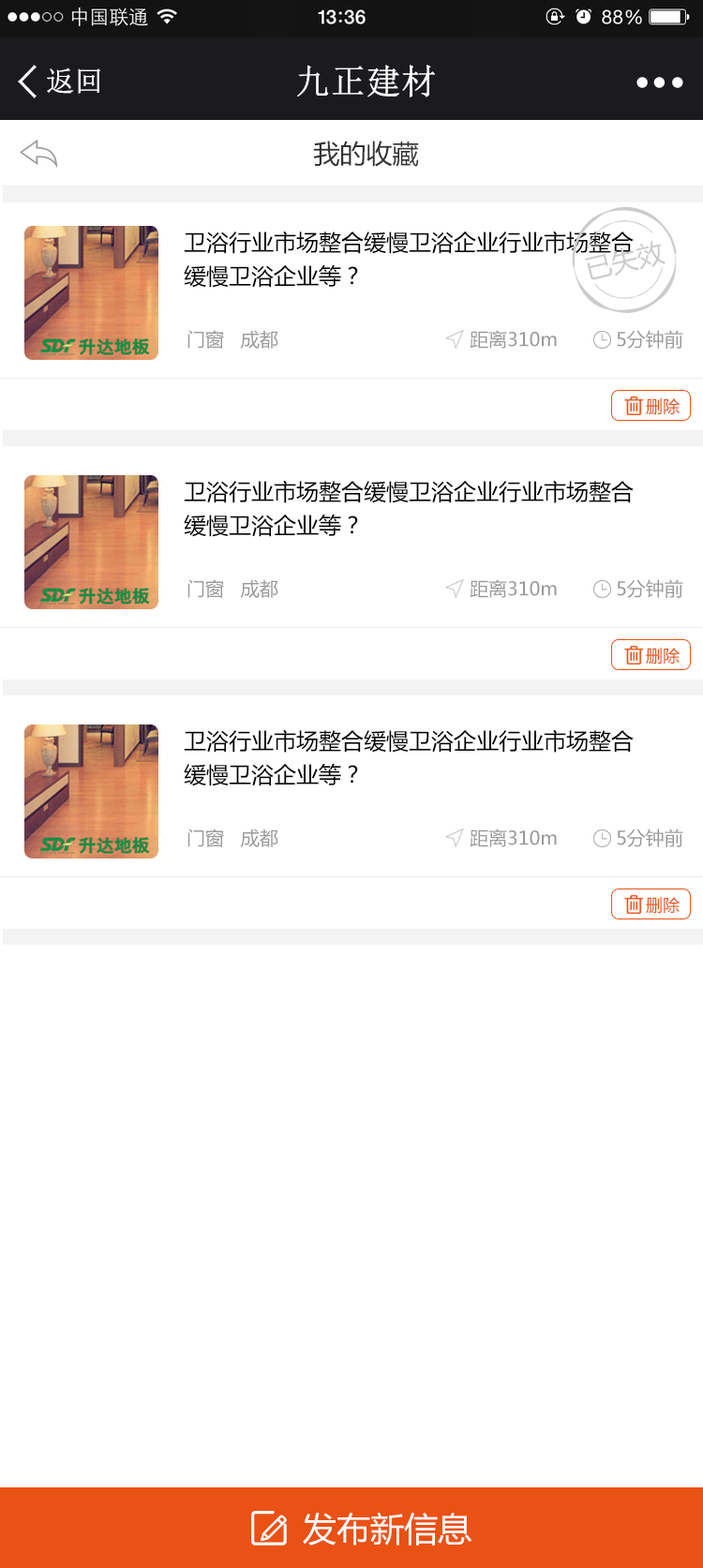
<style>
.page{position:relative;width:703px;height:1568px;background:#ffffff}
.page>*{position:absolute;margin:0}
.t1{font:34.4px "NSimSun";color:#ffffff;font-weight:bold}
.t2{font:28.1px "NSimSun";color:#ffffff;font-weight:bold}
.t3{font:26.2px "MicrosoftYaHei";color:#333333}
.t4{font:26.2px "MicrosoftYaHei";color:#333333;font-weight:bold}
.t5{font:22.5px/33.7px "MicrosoftYaHei";color:#000000}
.t6{font:18.7px "MicrosoftYaHei";color:#999999}
.t7{font:16.9px "MicrosoftYaHei";color:#ea5114}
.t8{font:33.7px "MicrosoftYaHei";color:#ffffff}
</style>
<div class="page">
<p class="t1" style="left:297px;top:65px;width:138px;height:32px">九正建材</p>
<p class="t2" style="left:47px;top:67px;width:53px;height:27px">返回</p>
<p class="t3" style="left:313px;top:141px;width:106px;height:26px"><span class="t4"><br></span>我的收藏</p>
<p class="t5" style="left:184px;top:231px;width:450px;height:57px">卫浴行业市场整合缓慢卫浴企业行业市场整合<br>缓慢卫浴企业等？</p>
<p class="t6" style="left:187px;top:330px;width:91px;height:19px">门窗   成都</p>
<p class="t6" style="left:470px;top:330px;width:87px;height:19px">距离310m</p>
<p class="t6" style="left:617px;top:330px;width:66px;height:19px">5分钟前</p>
<p class="t7" style="left:646px;top:398px;width:33px;height:17px">删除</p>
<p class="t5" style="left:184px;top:480px;width:450px;height:57px">卫浴行业市场整合缓慢卫浴企业行业市场整合<br>缓慢卫浴企业等？</p>
<p class="t6" style="left:187px;top:579px;width:91px;height:19px">门窗   成都</p>
<p class="t6" style="left:470px;top:579px;width:87px;height:19px">距离310m</p>
<p class="t6" style="left:617px;top:579px;width:66px;height:19px">5分钟前</p>
<p class="t7" style="left:646px;top:648px;width:33px;height:17px">删除</p>
<p class="t5" style="left:184px;top:729px;width:450px;height:57px">卫浴行业市场整合缓慢卫浴企业行业市场整合<br>缓慢卫浴企业等？</p>
<p class="t6" style="left:187px;top:829px;width:91px;height:18px">门窗   成都</p>
<p class="t6" style="left:470px;top:829px;width:87px;height:18px">距离310m</p>
<p class="t6" style="left:617px;top:829px;width:66px;height:18px">5分钟前</p>
<p class="t7" style="left:646px;top:897px;width:33px;height:17px">删除</p>
<p class="t8" style="left:303px;top:1512px;width:168px;height:34px">发布新信息</p>
</div>
